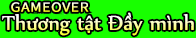
<style>
.page{position:relative;width:196px;height:38px;background:#18ff00}
.page>*{position:absolute;margin:0}
.t1{font:24px "UTM-Nyala"}
</style>
<div class="page">
<p class="t1" style="left:2px;top:12px;width:192px;height:24px">Thương tật Đầy mình</p>
</div>
